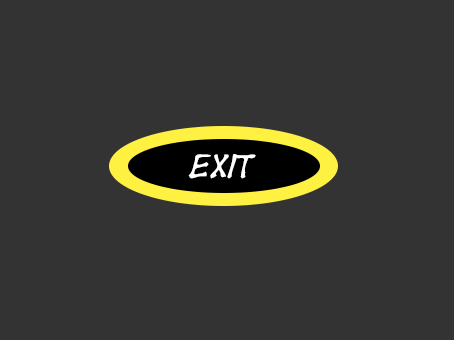
<style>
.page{position:relative;width:454px;height:340px;background:#333333}
.page>*{position:absolute;margin:0}
.t1{font:24.1px "Yearsupplyoffairycakes";color:#ffffff}
</style>
<div class="page">
<p class="t1" style="left:188px;top:154px;width:68px;height:25px">Exit</p>
</div>
